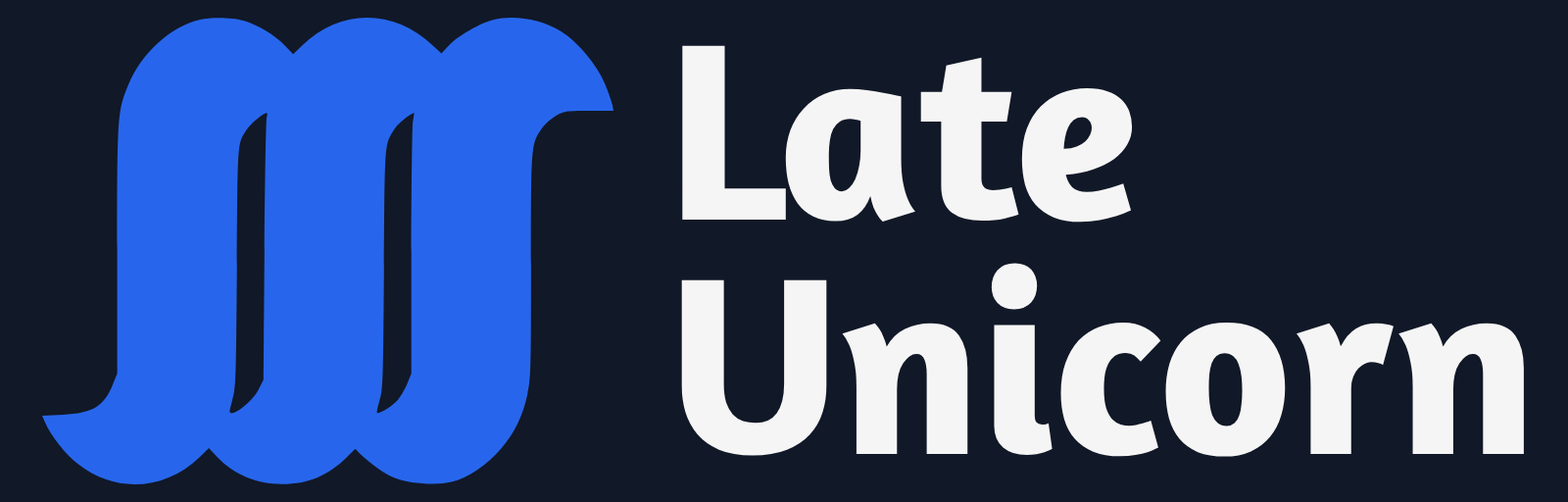
<style>
.page{position:relative;width:1568px;height:502px;background:#111827}
.page>*{position:absolute;margin:0}
.t1{font:256.5px "Amaranth-Bold";color:#f5f5f5}
</style>
<div class="page">
<p class="t1" style="left:682px;top:45px;width:451px;height:177px">Late</p>
<p class="t1" style="left:681px;top:263px;width:843px;height:194px">Unicorn</p>
</div>
